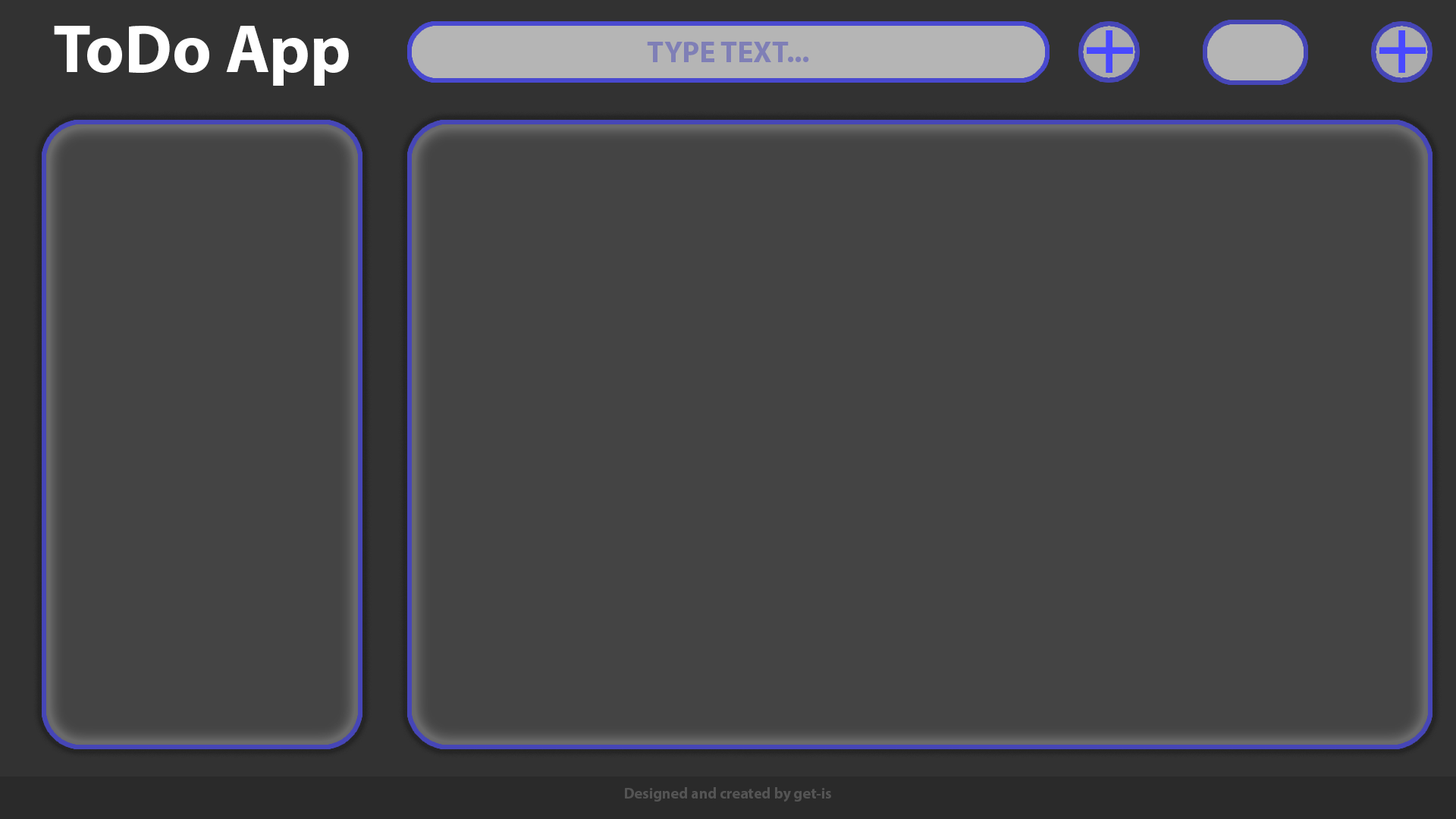
<style>
.page{position:relative;width:1456px;height:819px;background:#444444}
.page>*{position:absolute;margin:0}
.t1{font:68.2px "MyriadPro-Bold";color:#ffffff}
.t2{font:15.2px "MyriadPro-Bold";color:#545454}
</style>
<div class="page">
<p class="t1" style="left:54px;top:26px;width:295px;height:60px">ToDo App</p>
<p class="t2" style="left:625px;top:787px;width:206px;height:15px">Designed and created by get-is</p>
</div>
